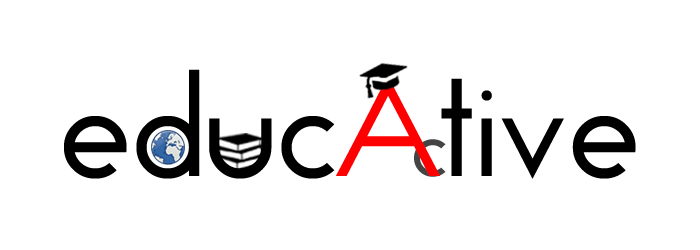
<style>
.page{position:relative;width:700px;height:250px;background:#ffffff}
.page>*{position:absolute;margin:0}
.t1{font:125px "TickerTape";color:#000000}
.t2{font:125px "TickerTape";color:#ff0000}
.t3{font:75px "TickerTape";color:#444444}
</style>
<div class="page">
<p class="t1" style="left:64px;top:69px;width:572px;height:110px">educ<span class="t2">A</span>tive</p>
<p class="t3" style="left:414px;top:139px;width:32px;height:38px">c</p>
</div>
